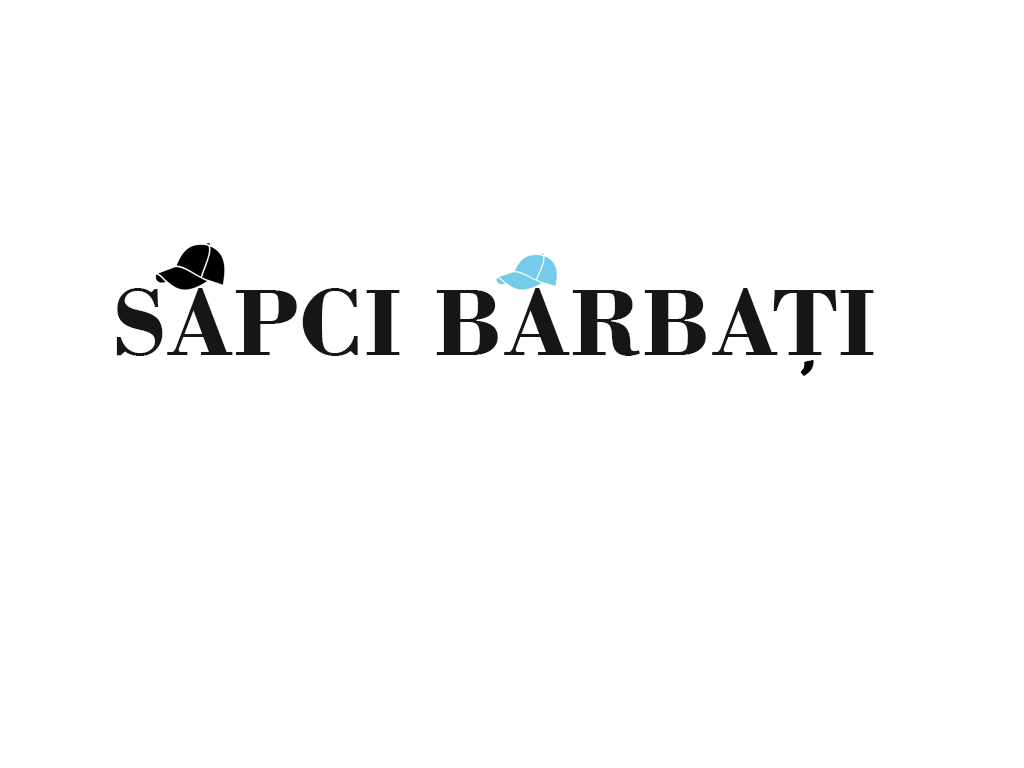
<style>
.page{position:relative;width:1024px;height:768px;background:#ffffff}
.page>*{position:absolute;margin:0}
.t1{font:100px "BodoniBT-Bold";color:#161616}
.t2{font:50px "BerlinSansFBDemi-Bold";color:#000000}
</style>
<div class="page">
<p class="t1" style="left:116px;top:288px;width:758px;height:68px">SAPCI BARBATI</p>
<p class="t2" style="left:800px;top:360px;width:14px;height:16px">,</p>
</div>
